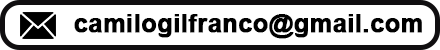
<style>
.page{position:relative;width:440px;height:50px;background:#ffffff}
.page>*{position:absolute;margin:0}
.t1{font:25px "Arial-BoldMT";color:#000000;font-weight:bold}
</style>
<div class="page">
<p class="t1" style="left:74px;top:14px;width:348px;height:25px">camilogilfranco@gmail.com</p>
</div>
